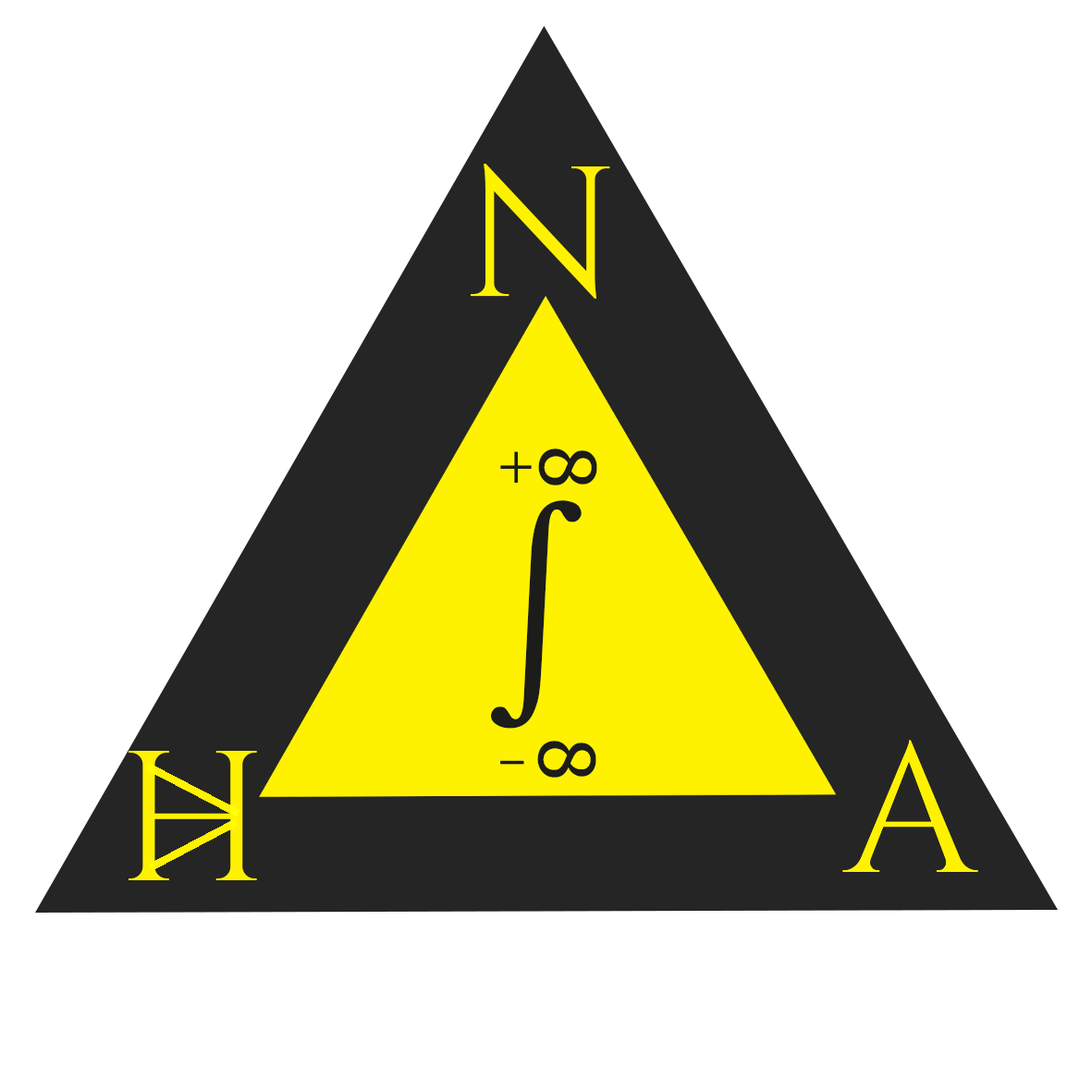
<style>
.page{position:relative;width:1092px;height:1092px;background:#ffffff}
.page>*{position:absolute;margin:0}
.t1{font:184.9px "Cinzel-Regular";color:#fff200}
.t2{font:77.1px "Tahoma";color:#1c1c1b}
.t3{font:77.1px "Cinzel-Regular";color:#1c1c1b}
.t4{font:231.2px "Cinzel-Regular";color:#1c1c1b}
</style>
<div class="page">
<p class="t1" style="left:471px;top:164px;width:139px;height:135px">N</p>
<p class="t2" style="left:538px;top:448px;width:59px;height:37px;rotate:91deg">8</p>
<p class="t3" style="left:500px;top:451px;width:32px;height:32px">+</p>
<p class="t4" style="left:491px;top:500px;width:91px;height:229px">∫</p>
<p class="t2" style="left:537px;top:741px;width:59px;height:37px;rotate:91deg">8</p>
<p class="t3" style="left:499px;top:760px;width:25px;height:5px">-</p>
</div>
